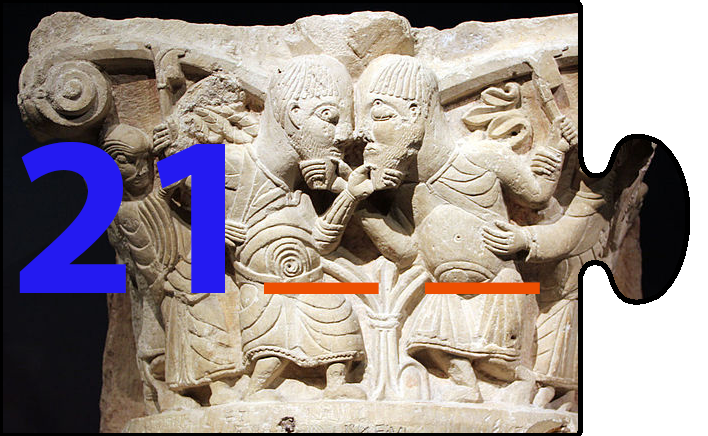
<style>
.page{position:relative;width:708px;height:436px}
.page>*{position:absolute;margin:0}
.t1{font:229.4px "MyriadPro-Bold";color:#241af1}
.t2{font:229.4px "MyriadPro-Bold";color:#ed4f01}
</style>
<div class="page">
<p class="t1" style="left:19px;top:142px;width:206px;height:151px">21</p>
<p class="t2" style="left:264px;top:282px;width:276px;height:12px">_ _</p>
</div>
